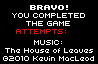
<style>
.page{position:relative;width:98px;height:64px;background:#000000}
.page>*{position:absolute;margin:0}
.t1{font:8px/8px "Uni0553";color:#ffffff}
.t2{font:8px/8px "Uni0563";color:#ffffff}
.t3{font:8px/8px "Uni0553";color:#ff0000}
</style>
<div class="page">
<p class="t1" style="left:9px;top:5px;width:79px;height:53px;text-align:center"><span class="t2">BRAVO!<br></span>YOU COMPLETED <br>THE GAME.<br><span class="t3">ATTEMPTS: 99</span><br><br>LUDUM DARE 2013<br>©BUMMZACK</p>
<p class="t1" style="left:3px;top:40px;width:91px;height:21px;text-align:center">MUSIC:<br>The House of Leaves<br>©2010 Kevin MacLeod</p>
</div>
